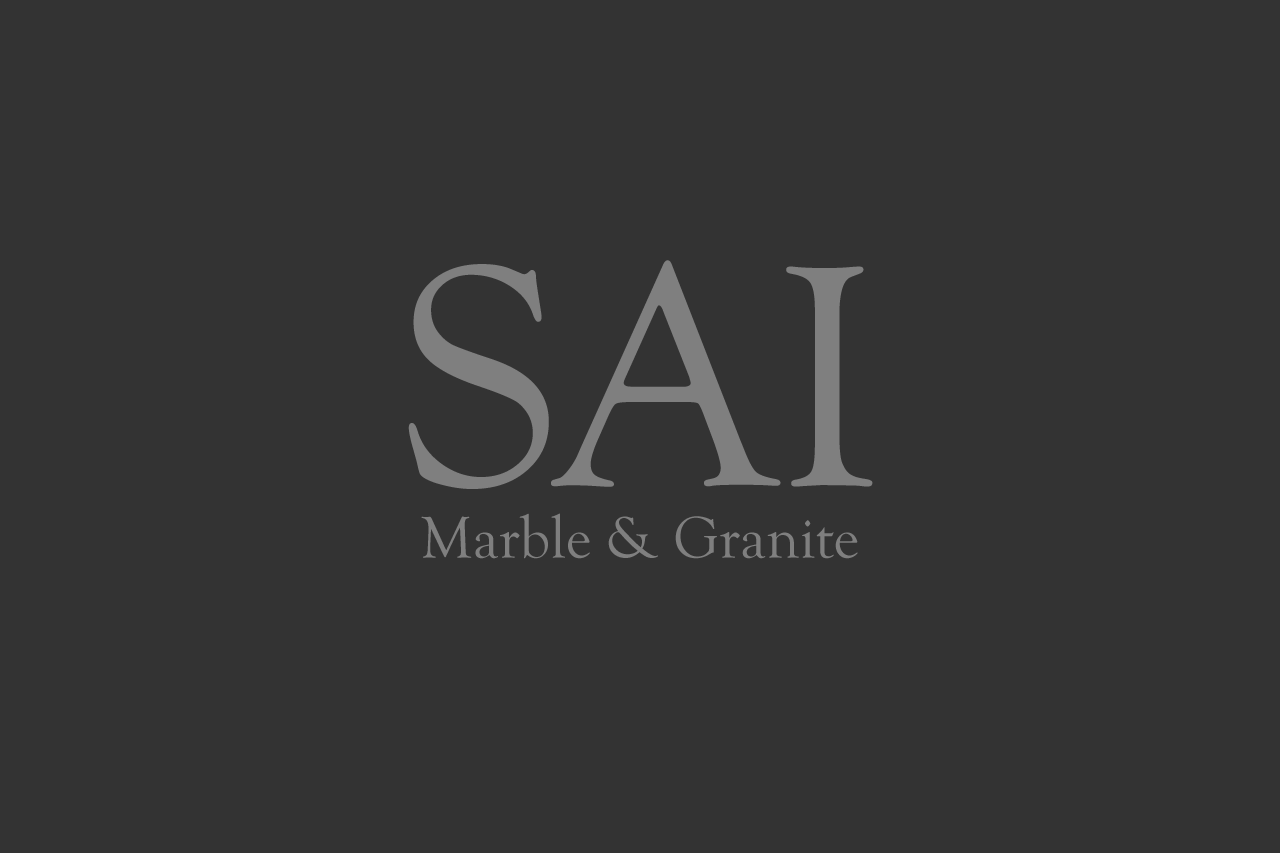
<style>
.page{position:relative;width:1280px;height:853px;background:#333333}
.page>*{position:absolute;margin:0}
.t1{font:60.8px "GoudyOldStyleT-Regular";color:#7f7f7f}
.t2{font:324.3px "GoudyOldStyleT-Regular";color:#7f7f7f}
</style>
<div class="page">
<p class="t1" style="left:408px;top:260px;width:465px;height:299px;text-align:center"><span class="t2">SAI<br></span>Marble &amp; Granite</p>
</div>
